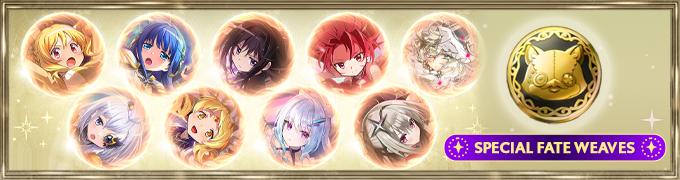
<style>
.page{position:relative;width:680px;height:180px}
.page>*{position:absolute;margin:0}
.t1{font:15.7px "Gibbs-Bold";letter-spacing:-0.01em;color:#ffeb89;text-transform:uppercase;font-weight:bold;scale:0.91 1}
</style>
<div class="page">
<p class="t1" style="left:474px;top:142px;width:161px;height:12px">special fate weaves</p>
</div>
